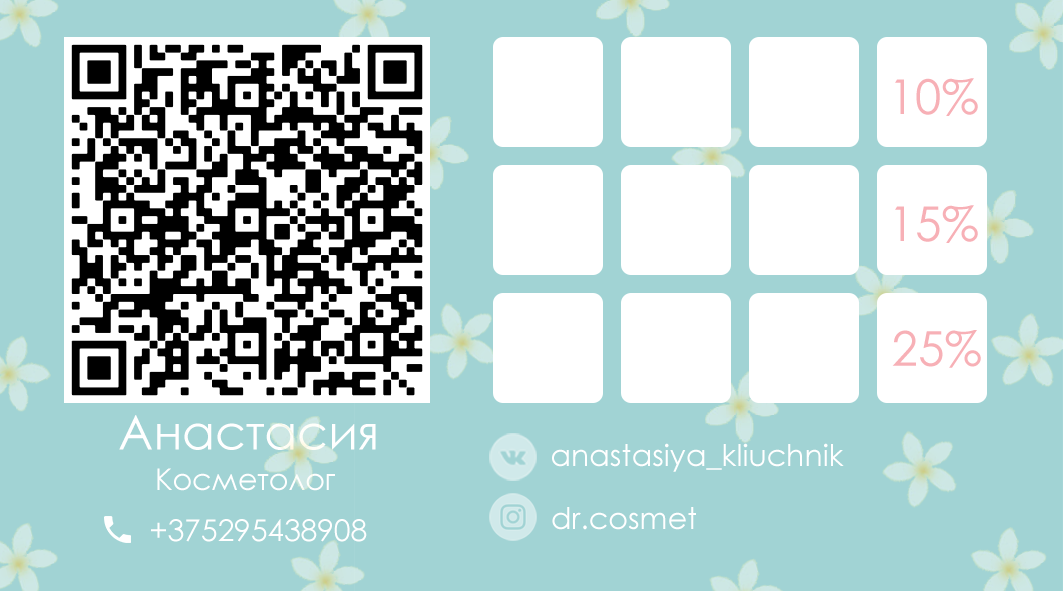
<style>
.page{position:relative;width:1063px;height:591px;background:#a1d3d4}
.page>*{position:absolute;margin:0}
.t1{font:48px "CenturyGothic";color:#f7b0b6}
.t2{font:48px "CenturyGothic";color:#ffffff}
.t3{font:30px "CenturyGothic";color:#ffffff}
</style>
<div class="page">
<p class="t1" style="left:895px;top:78px;width:83px;height:38px">10%</p>
<p class="t1" style="left:895px;top:205px;width:83px;height:38px">15%</p>
<p class="t1" style="left:892px;top:330px;width:89px;height:38px">25%</p>
<p class="t2" style="left:119px;top:415px;width:257px;height:35px">Анастасия</p>
<p class="t3" style="left:552px;top:443px;width:292px;height:29px">anastasiya_kliuchnik</p>
<p class="t3" style="left:157px;top:468px;width:178px;height:23px">Косметолог</p>
<p class="t3" style="left:552px;top:507px;width:144px;height:23px">dr.cosmet</p>
<p class="t3" style="left:151px;top:519px;width:216px;height:23px">+375295438908</p>
</div>
